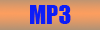
<style>
.page{position:relative;width:100px;height:30px}
.page>*{position:absolute;margin:0}
.t1{font:24px "Impact";color:#0d1df8}
</style>
<div class="page">
<p class="t1" style="left:30px;top:5px;width:41px;height:19px">MP3</p>
</div>
